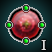
<style>
.page{position:relative;width:52px;height:52px}
.page>*{position:absolute;margin:0}
.t1{font:14px "Vani";color:#dadada}
</style>
<div class="page">
<p class="t1" style="left:41px;top:40px;width:5px;height:10px">I</p>
</div>
